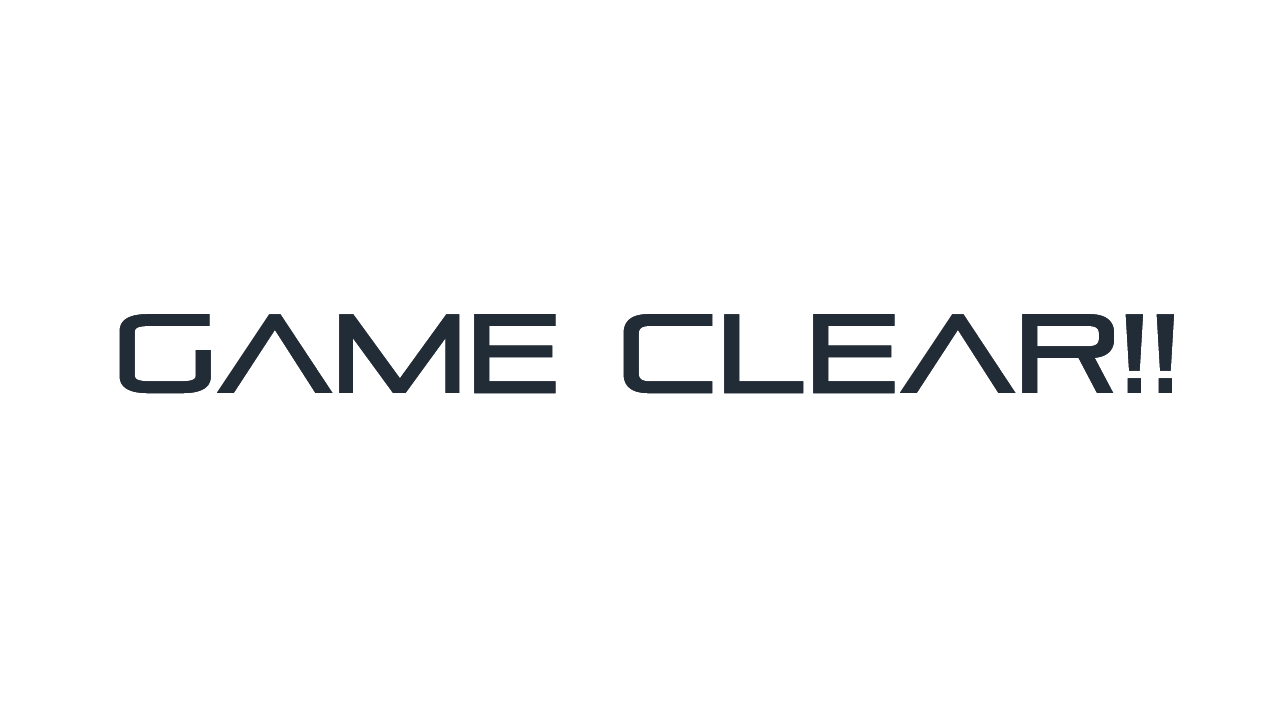
<style>
.page{position:relative;width:1280px;height:720px;background:#ffffff}
.page>*{position:absolute;margin:0}
.t1{font:112px "PirulenRg-Regular";color:#222c36}
</style>
<div class="page">
<p class="t1" style="left:119px;top:314px;width:1055px;height:80px">GAME CLEAR!!</p>
</div>
